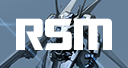
<style>
.page{position:relative;width:128px;height:68px;background:#657f99}
.page>*{position:absolute;margin:0}
.t1{font:45.8px "Cybertron";color:#ffffff}
</style>
<div class="page">
<p class="t1" style="left:16px;top:18px;width:96px;height:32px">RSM</p>
</div>
